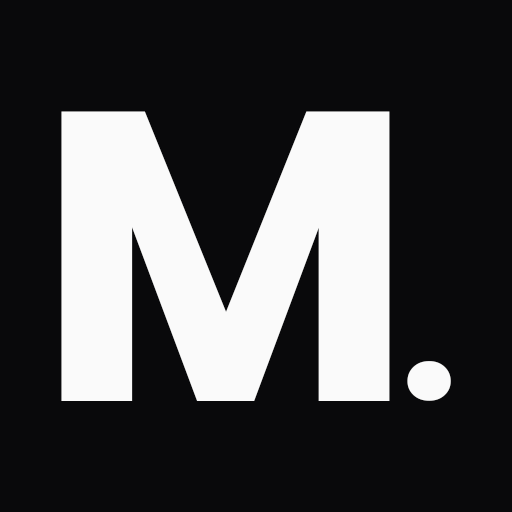
<style>
.page{position:relative;width:512px;height:512px;background:#09090b}
.page>*{position:absolute;margin:0}
.t1{font:412.2px "Poppins-Bold";color:#fafafa}
.t2{font:212.7px "Poppins-Bold";color:#fafafa}
</style>
<div class="page">
<p class="t1" style="left:61px;top:111px;width:329px;height:290px">M</p>
<p class="t2" style="left:407px;top:361px;width:44px;height:40px">.</p>
</div>
